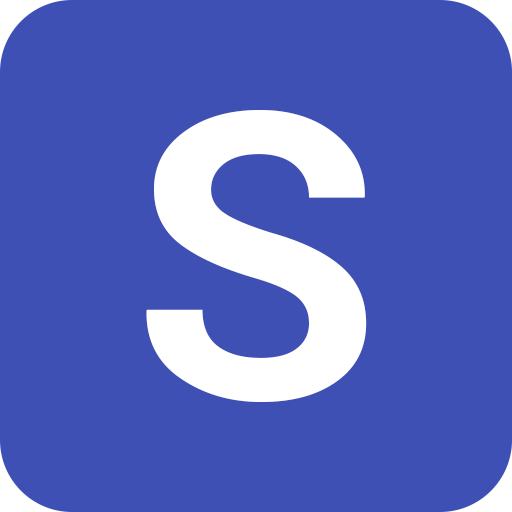
<style>
.page{position:relative;width:512px;height:512px;background:#3f50b5}
.page>*{position:absolute;margin:0}
.t1{font:400px "Roboto-Bold";color:#ffffff}
</style>
<div class="page">
<p class="t1" style="left:146px;top:110px;width:221px;height:292px">S</p>
</div>
